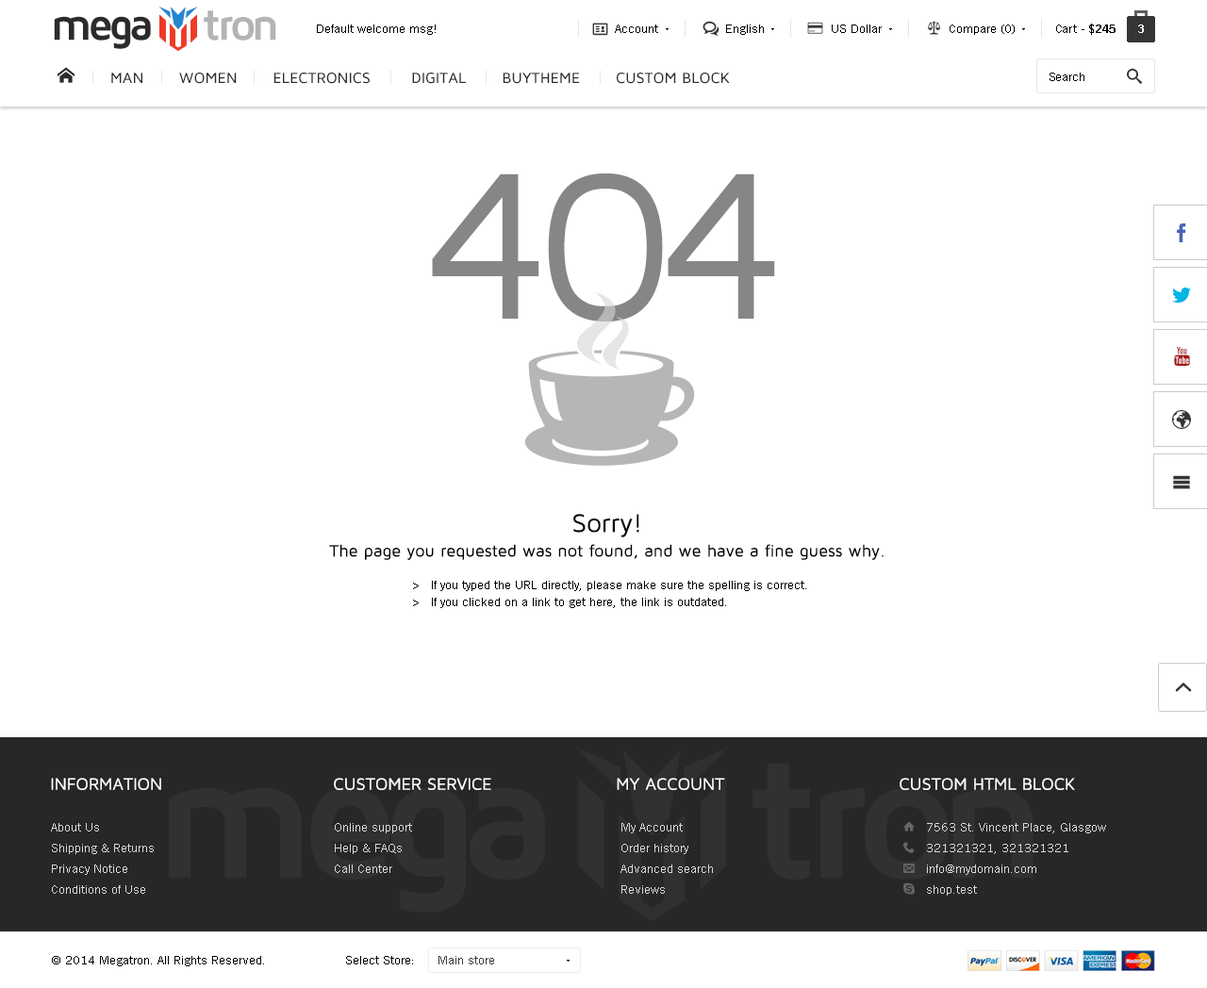
<style>
.page{position:relative;width:1207px;height:988px;background:#ffffff}
.page>*{position:absolute;margin:0}
.t1{font:45.3px "MavenProBold";letter-spacing:-0.1em;color:#2b2b2b}
.t2{font:45.3px "MavenProBold";letter-spacing:-0.1em;color:#b4b4b4}
.t3{font:12.3px "TradeGothicW01-Roman";color:#000000}
.t4{font:12.3px "TradeGothicW01-Bold2";color:#000000}
.t5{font:11.3px "TradeGothicW01-Bold2";color:#ffffff}
.t6{font:216px "MavenProRegular";letter-spacing:-0.08em;color:#868686;text-transform:uppercase}
.t7{font:17px/24.5px "MavenProRegular";color:#000000}
.t8{font:26.4px/18.9px "MavenProRegular";color:#000000}
.t9{font:17px/18.9px "MavenProRegular";color:#000000}
.t10{font:12.3px/17px "TradeGothicW01-Roman";color:#000000}
.t11{font:17px "MavenProRegular";color:#ffffff;text-transform:uppercase}
.t12{font:12.3px/20.7px "TradeGothicW01-Roman";color:#d9d9d9}
.t13{font:12.3px "TradeGothicW01-Roman";color:#3c3c3c}
</style>
<div class="page">
<p class="t1" style="left:54px;top:10px;width:222px;height:39px">mega     <span class="t2">tron</span></p>
<p class="t3" style="left:317px;top:25px;width:119px;height:10px">Default welcome msg!</p>
<p class="t3" style="left:615px;top:25px;width:43px;height:8px">Account</p>
<p class="t3" style="left:726px;top:25px;width:38px;height:10px">English</p>
<p class="t3" style="left:832px;top:25px;width:50px;height:8px">US Dollar</p>
<p class="t3" style="left:949px;top:25px;width:65px;height:10px">Compare (0)</p>
<p class="t3" style="left:1056px;top:24px;width:59px;height:11px">Cart - <span class="t4">$245</span></p>
<p class="t5" style="left:1138px;top:25px;width:6px;height:8px">3</p>
<p class="t3" style="left:1049px;top:73px;width:35px;height:8px">Search</p>
<p class="t6" style="left:432px;top:173px;width:343px;height:149px">404</p>
<p class="t7" style="left:329px;top:514px;width:554px;height:46px;text-align:center"><span class="t8">Sorry!<br></span>The page you requested was not found, and we have <span class="t9">a fine guess why.</span></p>
<p class="t10" style="left:413px;top:581px;width:393px;height:27px">&gt;   If you typed the URL directly, please make sure the spelling is correct.<br>&gt;   If you clicked on a link to get here, the link is outdated.</p>
<p class="t11" style="left:51px;top:778px;width:110px;height:12px">Information</p>
<p class="t11" style="left:334px;top:778px;width:157px;height:12px">customer service</p>
<p class="t11" style="left:617px;top:778px;width:108px;height:12px">My account</p>
<p class="t11" style="left:899px;top:778px;width:176px;height:12px">CUSTOM HTML BLOCK</p>
<p class="t12" style="left:51px;top:823px;width:103px;height:71px">About Us<br>Shipping &amp; Returns<br>Privacy Notice<br>Conditions of Use</p>
<p class="t12" style="left:335px;top:823px;width:77px;height:50px">Online support<br>Help &amp; FAQs<br>Call Center</p>
<p class="t12" style="left:620px;top:823px;width:93px;height:71px">My Account<br>Order history<br>Advanced search<br>Reviews</p>
<p class="t12" style="left:927px;top:823px;width:179px;height:73px">7563 St. Vincent Place, Glasgow<br>321321321, 321321321<br>info@mydomain.com<br>shop.test</p>
<p class="t3" style="left:52px;top:956px;width:212px;height:10px">© 2014 Megatron. All Rights Reserved.</p>
<p class="t3" style="left:346px;top:956px;width:67px;height:9px">Select Store:</p>
<p class="t13" style="left:438px;top:956px;width:56px;height:9px">Main store</p>
</div>
